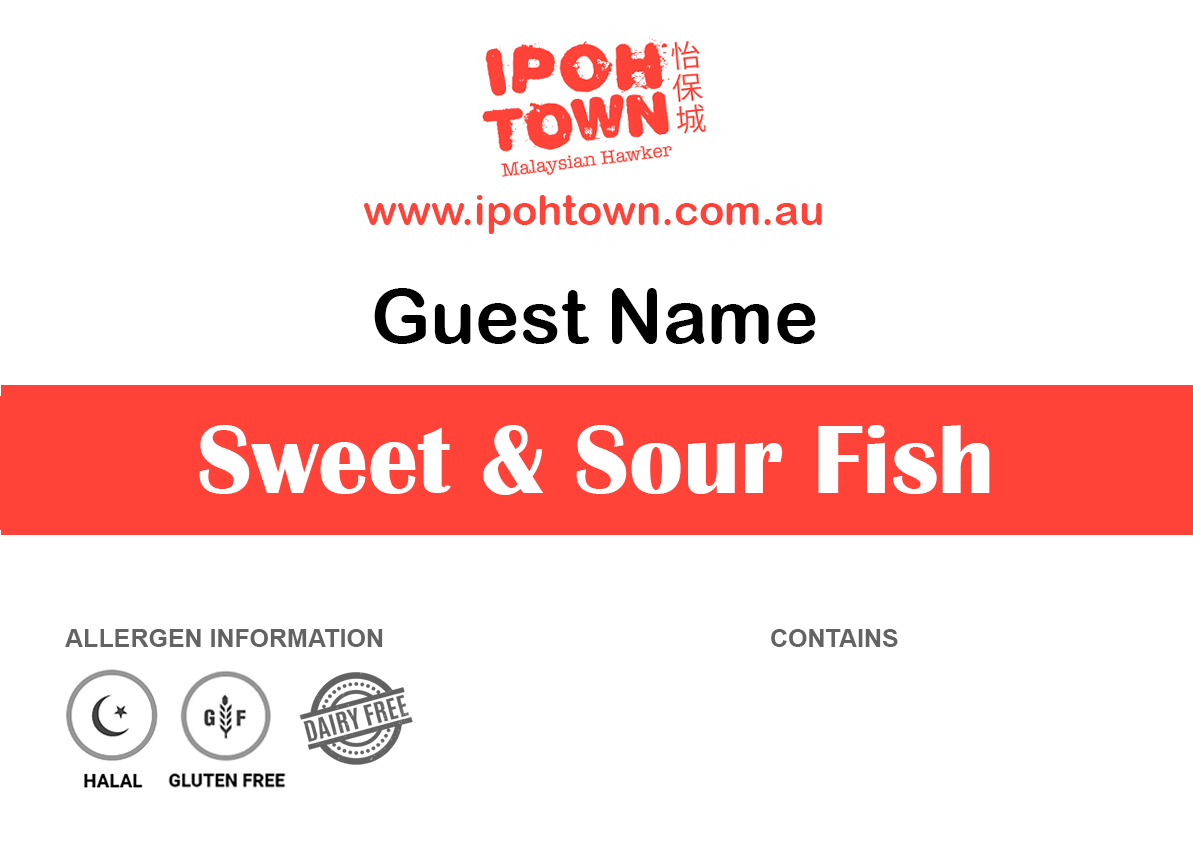
<style>
.page{position:relative;width:1193px;height:850px;background:#ffffff}
.page>*{position:absolute;margin:0}
.t1{font:41.7px "ArialRoundedMTBold";color:#ff4338}
.t2{font:75px "ArialRoundedMTBold";color:#000000}
.t3{font:100px "BritannicBold";color:#ffffff}
.t4{font:25px "Arial-BoldMT";color:#636363}
</style>
<div class="page">
<p class="t1" style="left:364px;top:195px;width:458px;height:39px">www.ipohtown.com.au</p>
<p class="t2" style="left:374px;top:288px;width:442px;height:56px">Guest Name</p>
<p class="t3" style="left:199px;top:425px;width:791px;height:70px">Sweet &amp; Sour Fish</p>
<p class="t4" style="left:65px;top:629px;width:318px;height:18px">ALLERGEN INFORMATION</p>
<p class="t4" style="left:771px;top:629px;width:127px;height:18px">CONTAINS</p>
</div>
